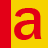
<style>
.page{position:relative;width:48px;height:48px;background:#f6d200}
.page>*{position:absolute;margin:0}
.t1{font:60px "FranklinGothic-Medium";color:#e30016}
</style>
<div class="page">
<p class="t1" style="left:14px;top:8px;width:28px;height:32px">a</p>
</div>
